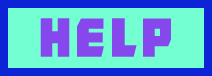
<style>
.page{position:relative;width:212px;height:76px;background:#73ffd2}
.page>*{position:absolute;margin:0}
.t1{font:48px "AaWLH";letter-spacing:0.12em;color:#8648ec}
</style>
<div class="page">
<p class="t1" style="left:40px;top:18px;width:131px;height:39px">HELP</p>
</div>
